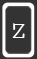
<style>
.page{position:relative;width:37px;height:59px;background:#333333}
.page>*{position:absolute;margin:0}
.t1{font:23.3px "Idolwild";letter-spacing:0.01em;color:#ffffff}
</style>
<div class="page">
<p class="t1" style="left:12px;top:23px;width:13px;height:15px">Z</p>
</div>
